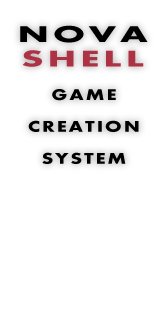
<style>
.page{position:relative;width:164px;height:314px;background:#ffffff}
.page>*{position:absolute;margin:0}
.t1{font:23.5px/24.5px "AharoniBold";letter-spacing:0.1em;color:#ad3244;scale:1.67 1}
.t2{font:23.5px/24.5px "AharoniBold";letter-spacing:0.1em;color:#000000;scale:1.67 1}
.t3{font:15.9px "AharoniBold";letter-spacing:0.1em;color:#000000;scale:1.27 1}
</style>
<div class="page">
<p class="t1" style="left:20px;top:25px;width:128px;height:42px;text-align:center"><span class="t2">NOVA<br></span>SHELL</p>
<p class="t3" style="left:28px;top:89px;width:111px;height:75px;text-align:center">GAME<br> CREATION <br>SYSTEM</p>
</div>
